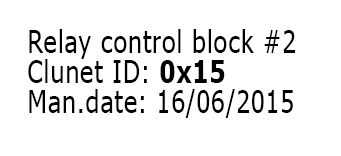
<style>
.page{position:relative;width:341px;height:156px;background:#ffffff}
.page>*{position:absolute;margin:0}
.t1{font:30.8px "Tahoma";letter-spacing:0.04em;color:#000000;scale:0.81 1}
.t2{font:30.8px "Tahoma-Bold";letter-spacing:0.04em;color:#000000;scale:0.81 1}
</style>
<div class="page">
<p class="t1" style="left:28px;top:29px;width:267px;height:89px">Relay control block #2<br>Clunet ID: <span class="t2">0x15<br></span>Man.date: 16/06/2015</p>
</div>
